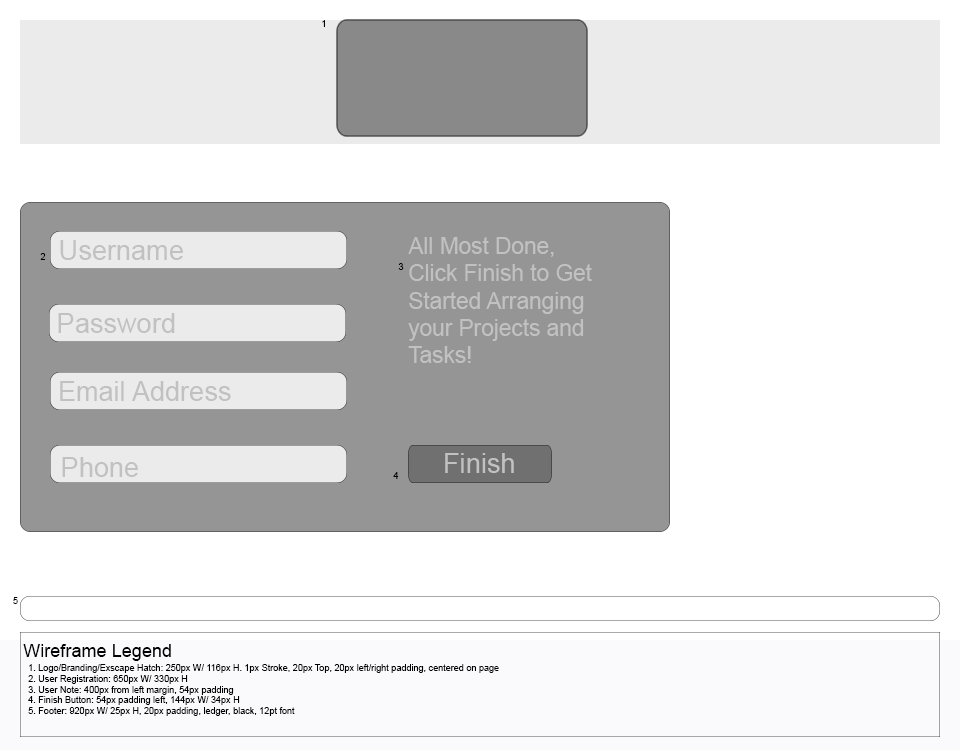
<style>
.page{position:relative;width:960px;height:750px;background:#ffffff}
.page>*{position:absolute;margin:0}
.t1{font:9.1px "ArialMT";color:#000000}
.t2{font:27.2px "ArialMT";color:#c2c1c1}
.t3{font:22.6px "ArialMT";color:#c2c1c1}
.t4{font:18.1px "ArialMT";color:#000000}
</style>
<div class="page">
<p class="t1" style="left:322px;top:20px;width:3px;height:7px">1</p>
<p class="t2" style="left:60px;top:240px;width:123px;height:20px">Username</p>
<p class="t3" style="left:408px;top:237px;width:184px;height:126px">All Most Done, <br>Click Finish to Get <br>Started Arranging <br>your Projects and <br>Tasks!</p>
<p class="t1" style="left:40px;top:253px;width:6px;height:7px">2</p>
<p class="t1" style="left:398px;top:263px;width:6px;height:7px">3</p>
<p class="t2" style="left:58px;top:313px;width:117px;height:20px">Password</p>
<p class="t2" style="left:60px;top:381px;width:171px;height:20px">Email Address</p>
<p class="t2" style="left:62px;top:457px;width:76px;height:20px">Phone</p>
<p class="t2" style="left:445px;top:453px;width:69px;height:20px">Finish</p>
<p class="t1" style="left:393px;top:472px;width:6px;height:7px">4</p>
<p class="t1" style="left:13px;top:597px;width:5px;height:7px">5</p>
<p class="t4" style="left:23px;top:644px;width:148px;height:17px">Wireframe Legend</p>
<p class="t1" style="left:28px;top:664px;width:471px;height:52px">1. Logo/Branding/Exscape Hatch: 250px W/ 116px H. 1px Stroke, 20px Top, 20px left/right padding, centered on page<br>2. User Registration: 650px W/ 330px H<br>3. User Note: 400px from left margin, 54px padding<br>4. Finish Button: 54px padding left, 144px W/ 34px H<br>5. Footer: 920px W/ 25px H, 20px padding, ledger, black, 12pt font</p>
</div>
